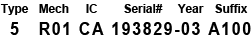
<style>
.page{position:relative;width:252px;height:38px;background:#ffffff}
.page>*{position:absolute;margin:0}
.t1{font:12px "Arial-BoldMT";letter-spacing:-0.01em;color:#000000}
.t2{font:12px "Arial-BoldMT";letter-spacing:-0.01em;color:#000000;text-transform:uppercase}
.t3{font:17.6px "Arial-BoldMT";letter-spacing:0.1em;color:#000000;text-transform:uppercase;scale:0.91 1}
</style>
<div class="page">
<p class="t1" style="left:0px;top:4px;width:29px;height:11px"><span class="t2">T</span>ype</p>
<p class="t1" style="left:39px;top:4px;width:30px;height:9px"><span class="t2">M</span>ech</p>
<p class="t2" style="left:86px;top:4px;width:11px;height:9px">IC</p>
<p class="t1" style="left:124px;top:4px;width:39px;height:9px"><span class="t2">S</span>erial#</p>
<p class="t1" style="left:177px;top:4px;width:27px;height:9px"><span class="t2">Y</span>ear</p>
<p class="t1" style="left:215px;top:4px;width:33px;height:9px"><span class="t2">S</span>uffix</p>
<p class="t3" style="left:10px;top:22px;width:241px;height:13px">5   R01 CA 193829-03 A100</p>
</div>
